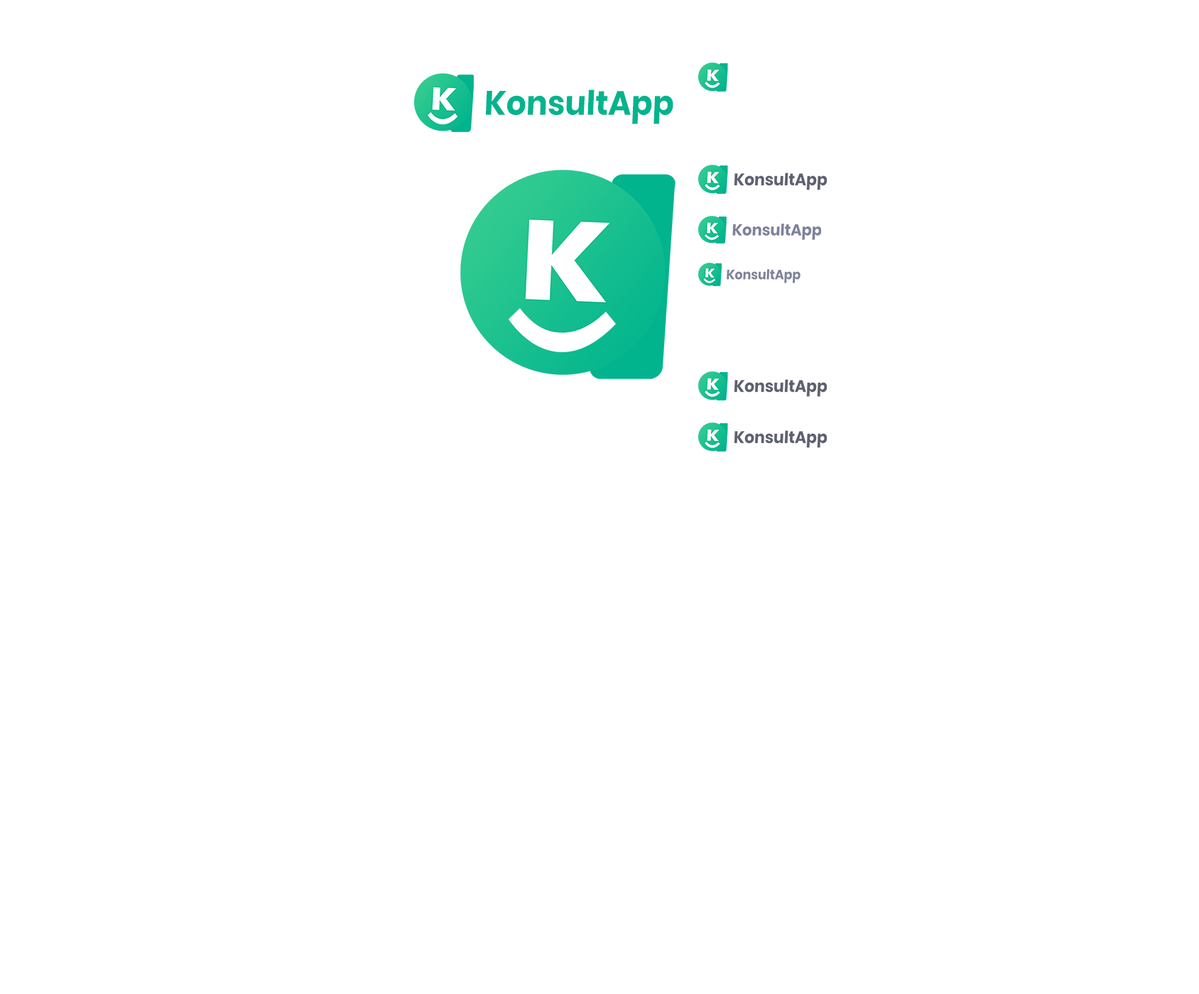
<style>
.page{position:relative;width:1199px;height:994px;background:#ffffff}
.page>*{position:absolute;margin:0}
.t1{font:34.1px "Poppins-Bold";color:#01b48e;font-style:italic;scale:0.92 1}
</style>
<div class="page">
<p class="t1" style="left:485px;top:90px;width:188px;height:34px">KonsultApp</p>
</div>
